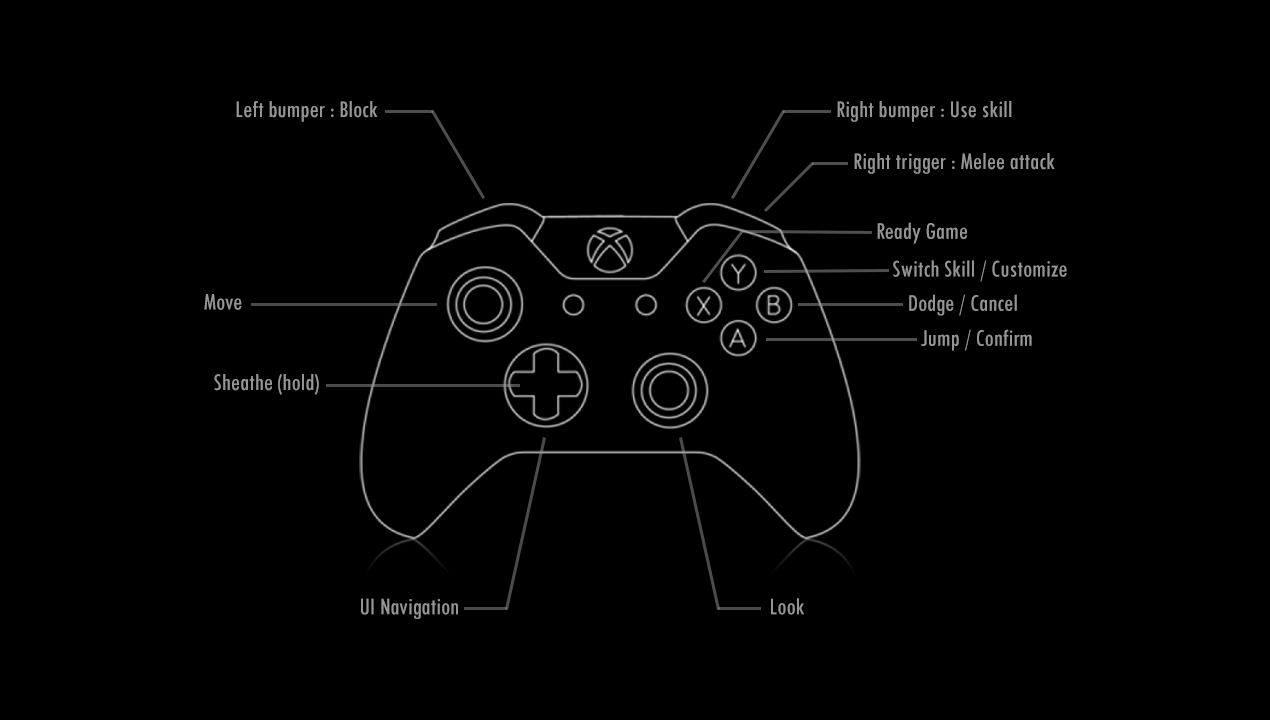
<style>
.page{position:relative;width:1270px;height:720px;background:#000000}
.page>*{position:absolute;margin:0}
.t1{font:25px "TwCenMT-Condensed";color:#959595}
</style>
<div class="page">
<p class="t1" style="left:236px;top:101px;width:142px;height:21px">Left bumper : Block</p>
<p class="t1" style="left:837px;top:101px;width:175px;height:21px">Right bumper : Use skill</p>
<p class="t1" style="left:854px;top:153px;width:201px;height:21px">Right trigger : Melee attack</p>
<p class="t1" style="left:877px;top:222px;width:90px;height:22px">Ready Game</p>
<p class="t1" style="left:893px;top:260px;width:174px;height:22px">Switch Skill / Customize</p>
<p class="t1" style="left:204px;top:294px;width:38px;height:16px">Move</p>
<p class="t1" style="left:909px;top:294px;width:108px;height:22px">Dodge / Cancel</p>
<p class="t1" style="left:921px;top:329px;width:111px;height:22px">Jump / Confirm</p>
<p class="t1" style="left:214px;top:374px;width:105px;height:21px">Sheathe (hold)</p>
<p class="t1" style="left:361px;top:598px;width:97px;height:21px">UI Navigation</p>
<p class="t1" style="left:771px;top:598px;width:33px;height:17px">Look</p>
</div>
